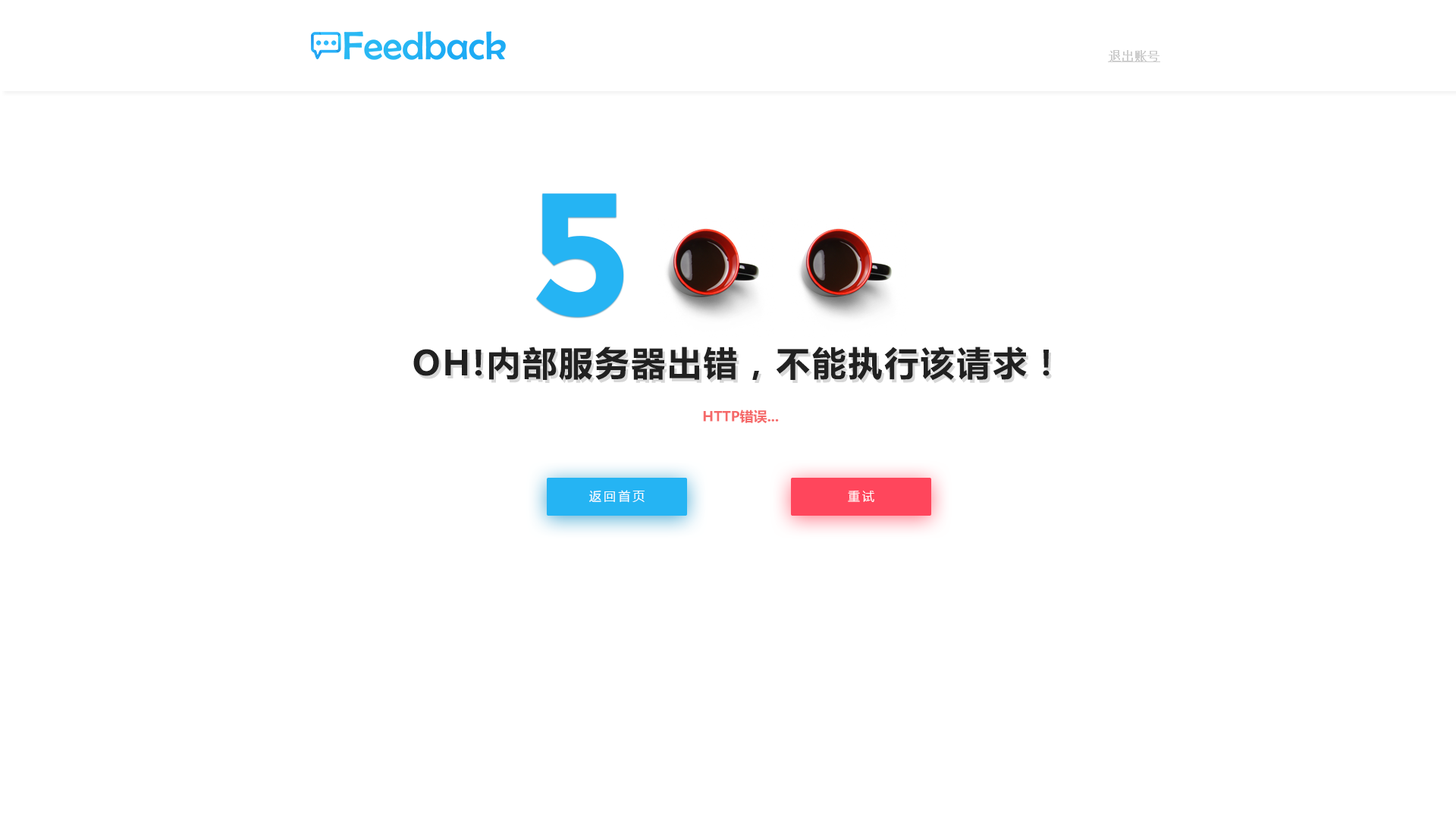
<style>
.page{position:relative;width:1456px;height:819px;background:#ffffff}
.page>*{position:absolute;margin:0}
.t1{font:12.1px "SimSun";color:#cecece;font-weight:bold;text-decoration:underline}
.t2{font:174.4px "Montserrat-Bold";letter-spacing:0.012em;color:#25b4f3;text-transform:uppercase}
.t3{font:34.1px "MicrosoftYaHei-Bold";letter-spacing:0.06em;color:#212121}
.t4{font:13.6px "MicrosoftYaHei-Bold";color:#f56969}
.t5{font:12.1px "MicrosoftYaHei";letter-spacing:0.192em;color:#ffffff;text-transform:uppercase}
</style>
<div class="page">
<p class="t1" style="left:1108px;top:50px;width:52px;height:12px">退出账号</p>
<p class="t2" style="left:536px;top:193px;width:88px;height:124px">5</p>
<p class="t3" style="left:413px;top:347px;width:637px;height:34px">OH!内部服务器出错，不能执行该请求！</p>
<p class="t4" style="left:703px;top:409px;width:76px;height:14px">HTTP错误...</p>
<p class="t5" style="left:589px;top:490px;width:56px;height:13px">返回首页</p>
<p class="t5" style="left:848px;top:491px;width:26px;height:11px">重试</p>
</div>
